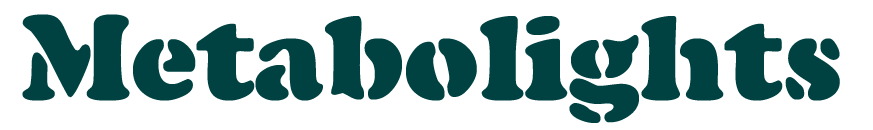
<style>
.page{position:relative;width:873px;height:130px;background:#ffffff}
.page>*{position:absolute;margin:0}
.t1{font:124.5px "Ellis";color:#004242}
</style>
<div class="page">
<p class="t1" style="left:22px;top:14px;width:818px;height:109px">Metabolights</p>
</div>
